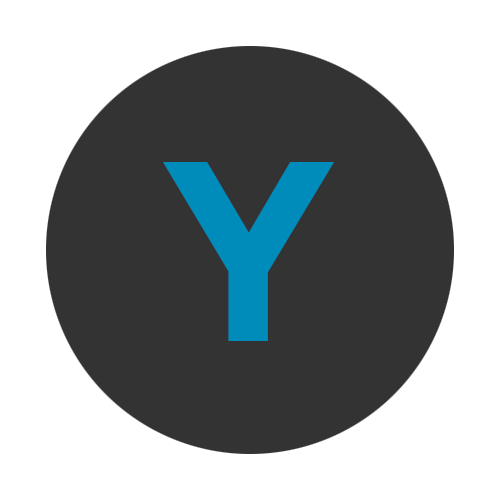
<style>
.page{position:relative;width:500px;height:500px;background:#ffffff}
.page>*{position:absolute;margin:0}
.t1{font:250px "HelveticaNeue-Bold";color:#008cba}
</style>
<div class="page">
<p class="t1" style="left:163px;top:162px;width:171px;height:179px">Y</p>
</div>
